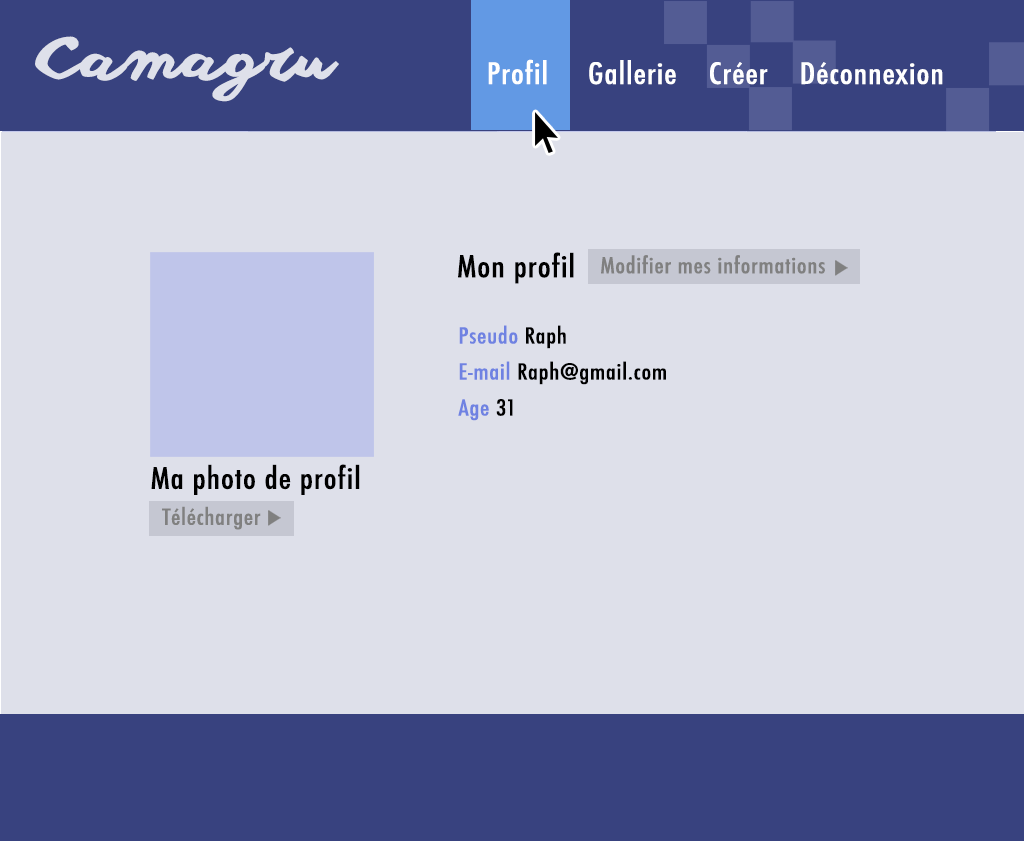
<style>
.page{position:relative;width:1024px;height:841px;background:#dee0ea}
.page>*{position:absolute;margin:0}
.t1{font:57.6px "anothershabby";color:#dee0ea;scale:1.17 1}
.t2{font:28.8px "Futura-CondensedMedium";letter-spacing:0.025em;color:#ffffff;scale:1.17 1}
.t3{font:29.6px "Futura-CondensedMedium";letter-spacing:0.025em;color:#000000;scale:1.15 1}
.t4{font:21.6px "Futura-CondensedMedium";letter-spacing:0.025em;color:#808080;scale:1.17 1}
.t5{font:21.6px/36px "Futura-CondensedMedium";letter-spacing:0.025em;color:#000000;scale:1.17 1}
.t6{font:21.6px/42px "Futura-CondensedMedium";letter-spacing:0.025em;color:#6f82e2;scale:1.17 1}
.t7{font:21.6px/36px "Futura-CondensedMedium";letter-spacing:0.025em;color:#6f82e2;scale:1.17 1}
.t8{font:28.8px/24px "Futura-CondensedMedium";letter-spacing:0.025em;color:#000000;scale:1.17 1}
.t9{font:28.8px/36px "Futura-CondensedMedium";letter-spacing:0.025em;color:#000000;scale:1.17 1}
.t10{font:21.6px/36px "Futura-CondensedMedium";letter-spacing:0.025em;color:#808080;scale:1.17 1}
</style>
<div class="page">
<p class="t1" style="left:35px;top:36px;width:304px;height:66px">Camagru</p>
<p class="t2" style="left:488px;top:59px;width:455px;height:26px">Profil     Gallerie    Créer    Déconnexion</p>
<p class="t3" style="left:458px;top:252px;width:116px;height:32px">Mon profil</p>
<p class="t4" style="left:601px;top:255px;width:224px;height:19px">Modifier mes informations</p>
<p class="t5" style="left:458px;top:325px;width:208px;height:96px"><span class="t6"><br></span><span class="t7">Pseudo </span>Raph<br><span class="t7">E-mail </span>Raph@gmail.com<br><span class="t7">Age </span>31</p>
<p class="t8" style="left:151px;top:464px;width:209px;height:66px"><span class="t9">M</span>a photo de profil<br><span class="t10">  Télécharger</span></p>
</div>
